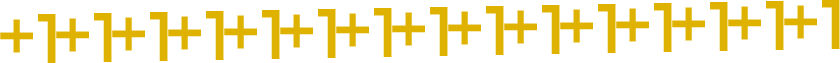
<style>
.page{position:relative;width:840px;height:63px;background:#ffffff}
.page>*{position:absolute;margin:0}
.t1{font:70px "Montserrat-Regular";color:#dfb200}
</style>
<div class="page">
<p class="t1" style="left:448px;top:6px;width:56px;height:49px">+1</p>
<p class="t1" style="left:504px;top:5px;width:56px;height:49px">+1</p>
<p class="t1" style="left:560px;top:4px;width:56px;height:49px">+1</p>
<p class="t1" style="left:616px;top:3px;width:56px;height:49px">+1</p>
<p class="t1" style="left:672px;top:2px;width:56px;height:49px">+1</p>
<p class="t1" style="left:728px;top:1px;width:56px;height:49px">+1</p>
<p class="t1" style="left:784px;top:0px;width:56px;height:49px">+1</p>
<p class="t1" style="left:0px;top:14px;width:56px;height:49px">+1</p>
<p class="t1" style="left:56px;top:13px;width:56px;height:49px">+1</p>
<p class="t1" style="left:112px;top:12px;width:56px;height:49px">+1</p>
<p class="t1" style="left:168px;top:11px;width:56px;height:49px">+1</p>
<p class="t1" style="left:224px;top:10px;width:56px;height:49px">+1</p>
<p class="t1" style="left:280px;top:9px;width:56px;height:49px">+1</p>
<p class="t1" style="left:336px;top:8px;width:56px;height:49px">+1</p>
<p class="t1" style="left:392px;top:7px;width:56px;height:49px">+1</p>
</div>
